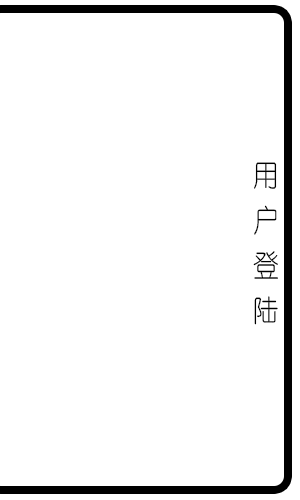
<style>
.page{position:relative;width:300px;height:500px;background:#ffffff}
.page>*{position:absolute;margin:0}
.t1{font:30px "YouYuan";color:#000000;scale:0.87 1}
</style>
<div class="page">
<p class="t1" style="left:253px;top:162px;width:25px;height:163px">用 户 登 陆</p>
</div>
